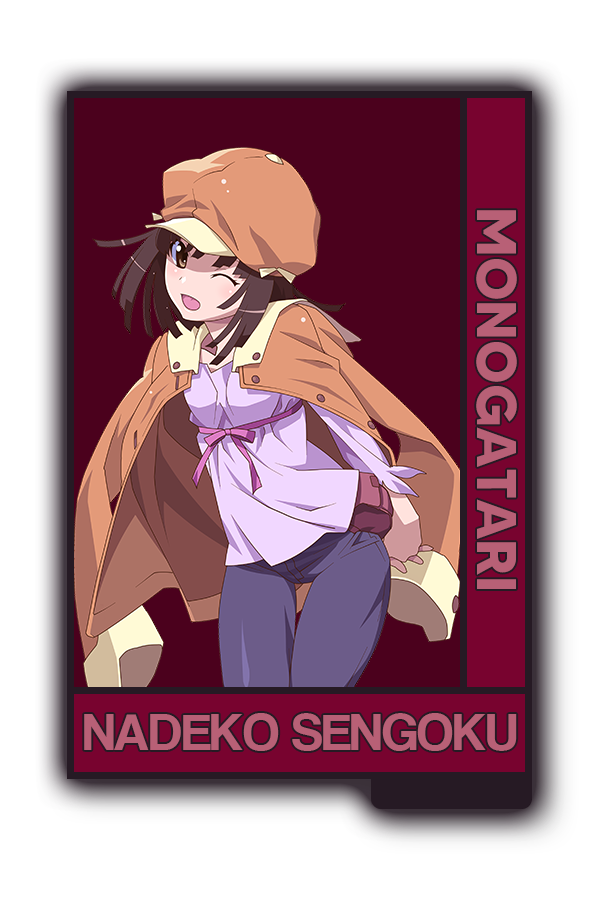
<style>
.page{position:relative;width:600px;height:900px;background:#ffffff}
.page>*{position:absolute;margin:0}
.t1{font:55.8px "MADETOMMY-Bold";color:#b86076}
.t2{font:53.7px "CoolveticaRg-Regular";color:#b86076}
</style>
<div class="page">
<p class="t1" style="left:476px;top:210px;width:41px;height:379px;rotate:90deg">MONOGATARI</p>
<p class="t2" style="left:84px;top:713px;width:433px;height:38px">NADEKO SENGOKU</p>
</div>
